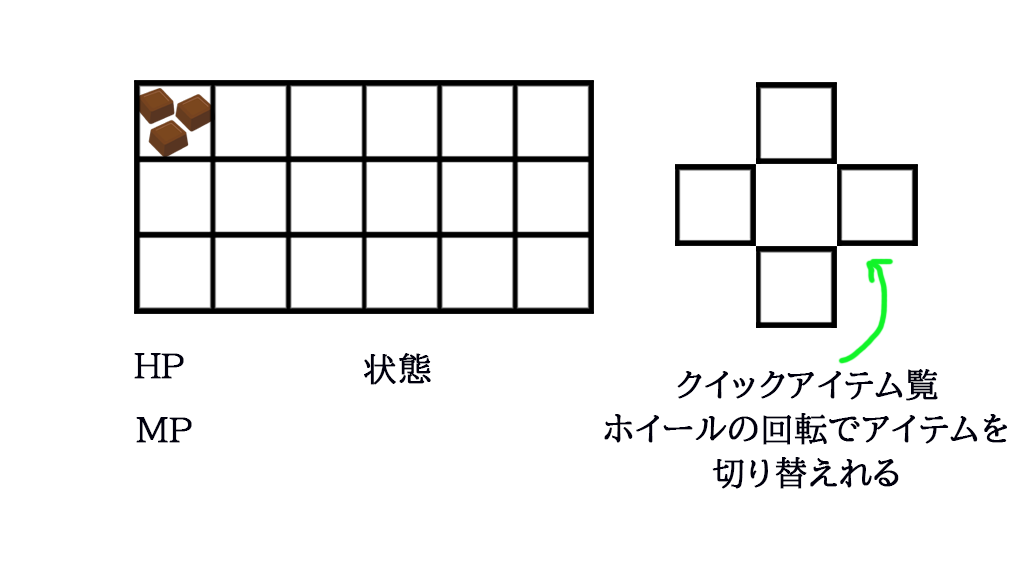
<style>
.page{position:relative;width:1024px;height:576px;background:#ffffff}
.page>*{position:absolute;margin:0}
.t1{font:12px/305.6px "BIZ-UDPMincho-Medium";color:#00000e;font-weight:bold}
.t2{font:12px/44.4px "BIZ-UDPMincho-Medium";color:#00000e;font-weight:bold}
</style>
<div class="page">
<p class="t1" style="left:134px;top:353px;width:50px;height:26px;text-align:center">HP</p>
<p class="t1" style="left:364px;top:353px;width:67px;height:32px;text-align:center">状態</p>
<p class="t2" style="left:604px;top:369px;width:403px;height:120px;text-align:center">クイックアイテム覧<br>ホイールの回転でアイテムを<br>切り替えれる</p>
<p class="t1" style="left:136px;top:417px;width:56px;height:26px;text-align:center">MP</p>
</div>
